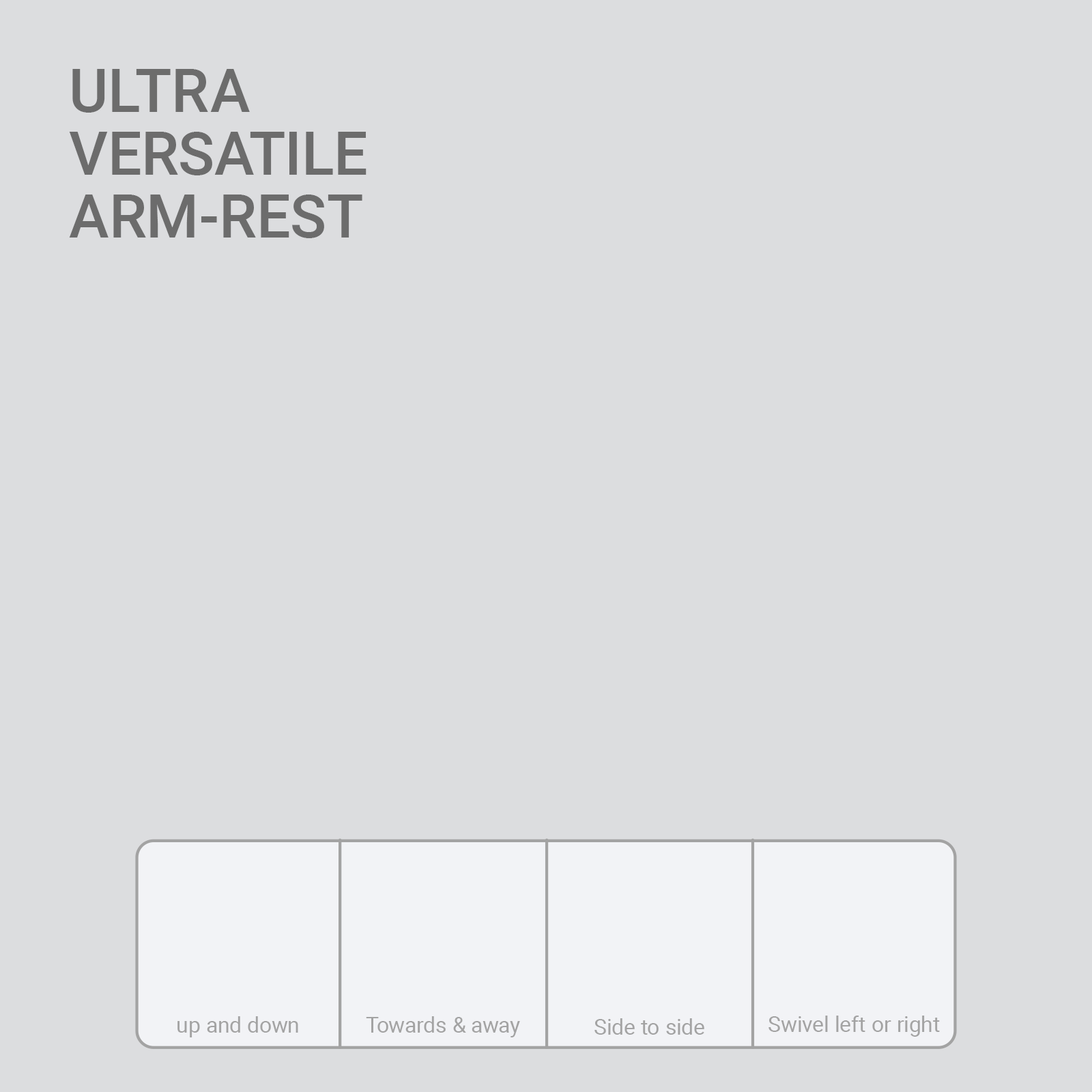
<style>
.page{position:relative;width:1092px;height:1092px;background:#dcdddf}
.page>*{position:absolute;margin:0}
.t1{font:59.7px/62.8px "Roboto-Medium";color:#6c6c6c}
.t2{font:21.8px "Roboto-Regular";color:#a3a3a3}
</style>
<div class="page">
<p class="t1" style="left:69px;top:69px;width:297px;height:169px">ULTRA<br>VERSATILE<br>ARM-REST</p>
<p class="t2" style="left:177px;top:1016px;width:121px;height:21px">up and down</p>
<p class="t2" style="left:366px;top:1016px;width:154px;height:21px">Towards &amp; away</p>
<p class="t2" style="left:594px;top:1018px;width:110px;height:17px">Side to side</p>
<p class="t2" style="left:768px;top:1016px;width:172px;height:21px">Swivel left or right</p>
</div>
